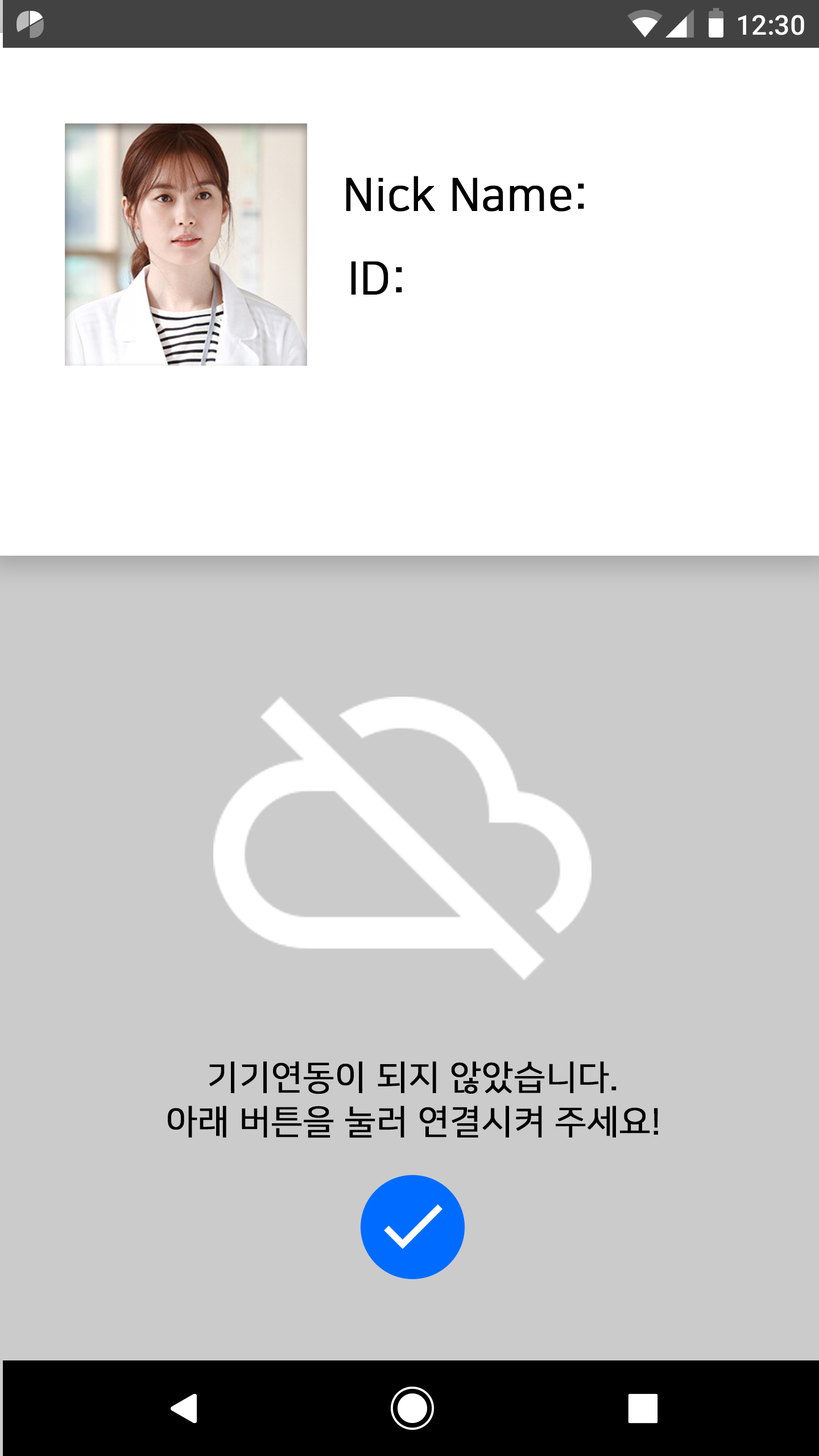
<style>
.page{position:relative;width:819px;height:1456px;background:#cbcbcb}
.page>*{position:absolute;margin:0}
.t1{font:27.3px "Roboto-Medium";color:#ffffff}
.t2{font:45.5px "NanumSquareOTFR";color:#000000;font-weight:bold}
.t3{font:34.1px "NanumSquareOTFR";color:#000000;font-weight:bold}
</style>
<div class="page">
<p class="t1" style="left:738px;top:15px;width:66px;height:20px">12:30</p>
<p class="t2" style="left:346px;top:176px;width:238px;height:36px">Nick Name:</p>
<p class="t2" style="left:351px;top:261px;width:51px;height:34px">ID:</p>
<p class="t3" style="left:209px;top:1061px;width:408px;height:33px">기기연동이 되지 않았습니다.</p>
<p class="t3" style="left:168px;top:1106px;width:490px;height:32px">아래 버튼을 눌러 연결시켜 주세요!</p>
</div>
